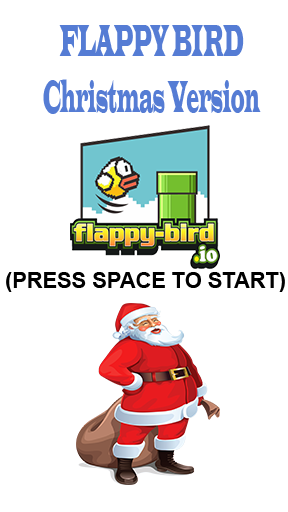
<style>
.page{position:relative;width:288px;height:512px;background:#ffffff}
.page>*{position:absolute;margin:0}
.t1{font:46.5px "LatinWide";color:#557cd4;scale:0.29 1}
.t2{font:21.9px "Arial-BoldMT";color:#000000}
</style>
<div class="page">
<p class="t1" style="left:43px;top:25px;width:218px;height:89px;text-align:center">FLAPPY BIRD<br>Christmas Version</p>
<p class="t2" style="left:6px;top:272px;width:279px;height:20px">(PRESS SPACE TO START)</p>
</div>
